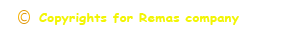
<style>
.page{position:relative;width:290px;height:33px;background:#ffffff}
.page>*{position:absolute;margin:0}
.t1{font:12px "ComicSansMS-Bold";color:#f2f504;scale:1.12 1}
</style>
<div class="page">
<p class="t1" style="left:39px;top:13px;width:200px;height:12px">Copyrights for Remas company</p>
</div>
